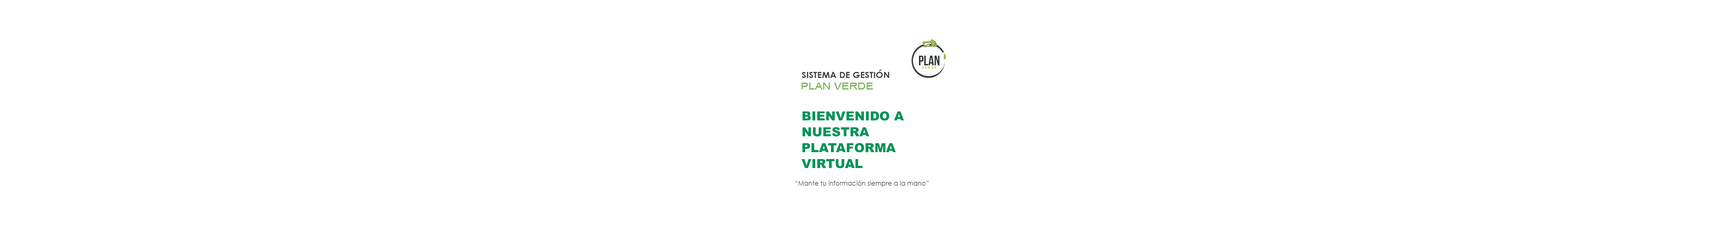
<style>
.page{position:relative;width:1735px;height:246px;background:#ffffff}
.page>*{position:absolute;margin:0}
.t1{font:8.4px "CenturyGothic-Bold";color:#3e403f;scale:1.07 1}
.t2{font:9.6px "ArialMT";color:#71b34c;scale:1.19 1}
.t3{font:12.5px/15.9px "Arial-Black";color:#009359}
.t4{font:6.9px "CenturyGothic";color:#555555;scale:0.93 1}
</style>
<div class="page">
<p class="t1" style="left:801px;top:70px;width:88px;height:8px">SISTEMA DE GESTIÓN</p>
<p class="t2" style="left:801px;top:83px;width:72px;height:7px">PLAN VERDE</p>
<p class="t3" style="left:801px;top:111px;width:103px;height:58px">BIENVENIDO A<br>NUESTRA<br>PLATAFORMA<br>VIRTUAL</p>
<p class="t4" style="left:795px;top:180px;width:133px;height:7px">“Mante tu información siempre a la mano”</p>
</div>
